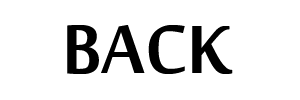
<style>
.page{position:relative;width:300px;height:100px;background:#ffffff}
.page>*{position:absolute;margin:0}
.t1{font:105px "MoolBoran";color:#000000}
</style>
<div class="page">
<p class="t1" style="left:67px;top:25px;width:166px;height:49px">BACK</p>
</div>
